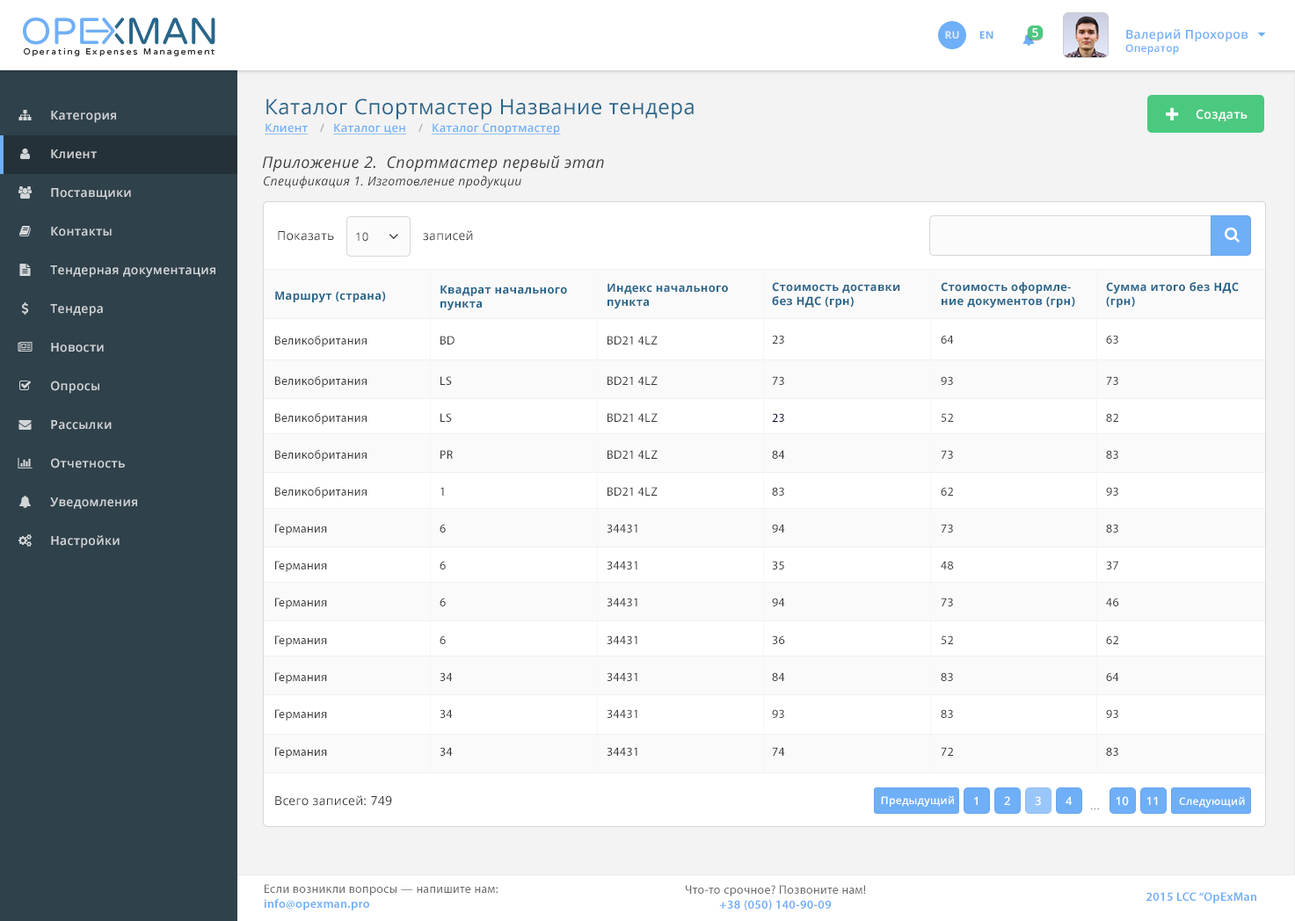
<style>
.page{position:relative;width:1295px;height:921px;background:#ffffff}
.page>*{position:absolute;margin:0}
.t1{font:12.3px "OpenSans-Semibold";letter-spacing:0.025em;color:#ffffff}
.t2{font:12.3px "OpenSans-Semibold";letter-spacing:0.025em;color:#6eaef7}
.t3{font:10.5px "OpenSans-Semibold";letter-spacing:0.025em;color:#6eaef7}
.t4{font:10.5px "OpenSans-Bold";letter-spacing:0.025em;color:#dbe9fd;text-transform:uppercase}
.t5{font:10.5px "OpenSans-Bold";letter-spacing:0.025em;color:#6faff8;text-transform:uppercase}
.t6{font:21px "OpenSans";letter-spacing:0.025em;color:#29658b}
.t7{font:12.3px "OpenSans-Semibold";letter-spacing:0.025em;color:#d2d5d7}
.t8{font:11.4px "OpenSans-Semibold";letter-spacing:0.025em;color:#6faff8;text-decoration:underline}
.t9{font:11.4px "OpenSans-Semibold";letter-spacing:0.025em;color:#afafaf}
.t10{font:15.8px "OpenSans-Italic";letter-spacing:0.025em;color:#373838}
.t11{font:12.3px "OpenSans-Italic";letter-spacing:0.025em;color:#373838}
.t12{font:12.3px "OpenSans";letter-spacing:0.025em;color:#333333}
.t13{font:11.4px "OpenSans";letter-spacing:0.025em;color:#333333}
.t14{font:11.4px "OpenSans-Bold";letter-spacing:0.025em;color:#29668b}
.t15{font:12.3px "MyriadPro-Regular";letter-spacing:0.025em;color:#3a3a3a}
.t16{font:12.3px "MyriadPro-Regular";letter-spacing:0.025em;color:#333333}
.t17{font:12.3px "MyriadPro-Regular";letter-spacing:0.025em;color:#000033}
.t18{font:10.5px "OpenSans-Semibold";letter-spacing:0.025em;color:#ffffff}
.t19{font:11.4px "OpenSans-Semibold";letter-spacing:0.025em;color:#ffffff}
.t20{font:11.4px "OpenSans";letter-spacing:0.025em;color:#999999}
.t21{font:12.3px "MyriadPro-Regular";letter-spacing:0.025em;color:#696969}
.t22{font:12.3px "MyriadPro-Semibold";letter-spacing:0.025em;color:#6eaef8}
</style>
<div class="page">
<p class="t1" style="left:1032px;top:28px;width:6px;height:10px">5</p>
<p class="t2" style="left:1125px;top:29px;width:123px;height:25px">Валерий Прохоров<br><span class="t3">Оператор</span></p>
<p class="t4" style="left:945px;top:31px;width:14px;height:8px">Ru</p>
<p class="t5" style="left:979px;top:31px;width:14px;height:8px">EN</p>
<p class="t6" style="left:266px;top:98px;width:427px;height:22px">Каталог Спортмастер Название тендера</p>
<p class="t7" style="left:51px;top:111px;width:65px;height:12px">Категория</p>
<p class="t1" style="left:1195px;top:109px;width:52px;height:12px">Создать</p>
<p class="t8" style="left:265px;top:123px;width:43px;height:11px">Клиент</p>
<p class="t9" style="left:320px;top:123px;width:4px;height:9px">/</p>
<p class="t8" style="left:333px;top:123px;width:73px;height:11px">Каталог цен</p>
<p class="t9" style="left:418px;top:123px;width:5px;height:9px">/</p>
<p class="t8" style="left:432px;top:123px;width:129px;height:11px">Каталог Спортмастер</p>
<p class="t7" style="left:51px;top:149px;width:46px;height:10px">Клиент</p>
<p class="t10" style="left:262px;top:156px;width:342px;height:16px">Приложение 2.  Спортмастер первый этап</p>
<p class="t11" style="left:264px;top:176px;width:257px;height:13px">Спецификация 1. Изготовление продукции</p>
<p class="t7" style="left:51px;top:188px;width:80px;height:12px">Поставщики</p>
<p class="t7" style="left:51px;top:227px;width:61px;height:9px">Контакты</p>
<p class="t12" style="left:278px;top:231px;width:56px;height:10px">Показать</p>
<p class="t13" style="left:356px;top:232px;width:12px;height:10px">10</p>
<p class="t12" style="left:423px;top:230px;width:50px;height:11px">записей</p>
<p class="t7" style="left:50px;top:265px;width:165px;height:13px">Тендерная документация</p>
<p class="t14" style="left:275px;top:291px;width:111px;height:11px">Маршрут (страна)</p>
<p class="t14" style="left:440px;top:285px;width:127px;height:25px">Квадрат начального<br>пункта</p>
<p class="t14" style="left:607px;top:283px;width:121px;height:25px">Индекс начального<br>пункта</p>
<p class="t14" style="left:772px;top:282px;width:128px;height:26px">Стоимость доставки <br>без НДС (грн)</p>
<p class="t14" style="left:940px;top:282px;width:135px;height:26px">Стоимость оформле-<br>ние документов (грн)</p>
<p class="t14" style="left:1106px;top:282px;width:132px;height:26px">Сумма итого без НДС<br>(грн)</p>
<p class="t7" style="left:50px;top:304px;width:53px;height:12px">Тендера</p>
<p class="t15" style="left:275px;top:336px;width:91px;height:11px">Великобритания</p>
<p class="t15" style="left:440px;top:336px;width:14px;height:9px">BD</p>
<p class="t15" style="left:607px;top:336px;width:50px;height:9px">BD21 4LZ</p>
<p class="t15" style="left:772px;top:335px;width:12px;height:9px">23</p>
<p class="t15" style="left:940px;top:335px;width:14px;height:9px">64</p>
<p class="t15" style="left:1106px;top:335px;width:12px;height:9px">63</p>
<p class="t7" style="left:51px;top:343px;width:53px;height:9px">Новости</p>
<p class="t15" style="left:275px;top:376px;width:91px;height:12px">Великобритания</p>
<p class="t15" style="left:440px;top:376px;width:12px;height:9px">LS</p>
<p class="t15" style="left:607px;top:376px;width:50px;height:9px">BD21 4LZ</p>
<p class="t16" style="left:772px;top:376px;width:12px;height:9px">73</p>
<p class="t15" style="left:940px;top:376px;width:13px;height:9px">93</p>
<p class="t15" style="left:1106px;top:376px;width:12px;height:9px">73</p>
<p class="t7" style="left:51px;top:381px;width:48px;height:13px">Опросы</p>
<p class="t15" style="left:275px;top:413px;width:91px;height:12px">Великобритания</p>
<p class="t15" style="left:440px;top:413px;width:12px;height:9px">LS</p>
<p class="t15" style="left:607px;top:413px;width:50px;height:9px">BD21 4LZ</p>
<p class="t17" style="left:772px;top:413px;width:12px;height:9px">23</p>
<p class="t15" style="left:940px;top:413px;width:13px;height:9px">52</p>
<p class="t15" style="left:1106px;top:413px;width:12px;height:9px">82</p>
<p class="t7" style="left:51px;top:420px;width:61px;height:10px">Рассылки</p>
<p class="t15" style="left:275px;top:450px;width:91px;height:11px">Великобритания</p>
<p class="t15" style="left:440px;top:450px;width:13px;height:9px">PR</p>
<p class="t15" style="left:607px;top:450px;width:50px;height:9px">BD21 4LZ</p>
<p class="t16" style="left:772px;top:450px;width:13px;height:9px">84</p>
<p class="t15" style="left:940px;top:450px;width:13px;height:9px">73</p>
<p class="t15" style="left:1106px;top:450px;width:12px;height:9px">83</p>
<p class="t7" style="left:51px;top:458px;width:74px;height:10px">Отчетность</p>
<p class="t7" style="left:50px;top:497px;width:87px;height:12px">Уведомления</p>
<p class="t15" style="left:275px;top:487px;width:91px;height:11px">Великобритания</p>
<p class="t15" style="left:440px;top:487px;width:4px;height:9px">1</p>
<p class="t15" style="left:607px;top:487px;width:50px;height:9px">BD21 4LZ</p>
<p class="t15" style="left:772px;top:487px;width:12px;height:9px">83</p>
<p class="t15" style="left:940px;top:487px;width:13px;height:9px">62</p>
<p class="t15" style="left:1106px;top:487px;width:12px;height:9px">93</p>
<p class="t15" style="left:275px;top:524px;width:52px;height:11px">Германия</p>
<p class="t15" style="left:439px;top:524px;width:7px;height:9px">6</p>
<p class="t15" style="left:606px;top:524px;width:31px;height:9px">34431</p>
<p class="t15" style="left:772px;top:524px;width:13px;height:9px">94</p>
<p class="t15" style="left:940px;top:524px;width:13px;height:9px">73</p>
<p class="t15" style="left:1106px;top:524px;width:12px;height:9px">83</p>
<p class="t7" style="left:51px;top:535px;width:69px;height:13px">Настройки</p>
<p class="t15" style="left:275px;top:561px;width:52px;height:11px">Германия</p>
<p class="t15" style="left:439px;top:561px;width:7px;height:9px">6</p>
<p class="t15" style="left:606px;top:561px;width:31px;height:9px">34431</p>
<p class="t15" style="left:772px;top:561px;width:12px;height:9px">35</p>
<p class="t15" style="left:940px;top:561px;width:14px;height:9px">48</p>
<p class="t15" style="left:1106px;top:561px;width:12px;height:9px">37</p>
<p class="t15" style="left:275px;top:598px;width:52px;height:11px">Германия</p>
<p class="t15" style="left:439px;top:598px;width:7px;height:8px">6</p>
<p class="t15" style="left:606px;top:598px;width:31px;height:8px">34431</p>
<p class="t15" style="left:772px;top:598px;width:13px;height:8px">94</p>
<p class="t15" style="left:940px;top:598px;width:13px;height:8px">73</p>
<p class="t15" style="left:1106px;top:598px;width:13px;height:8px">46</p>
<p class="t15" style="left:275px;top:635px;width:52px;height:12px">Германия</p>
<p class="t15" style="left:439px;top:635px;width:7px;height:9px">6</p>
<p class="t15" style="left:606px;top:635px;width:31px;height:9px">34431</p>
<p class="t15" style="left:772px;top:635px;width:13px;height:9px">36</p>
<p class="t15" style="left:940px;top:635px;width:13px;height:9px">52</p>
<p class="t15" style="left:1106px;top:635px;width:12px;height:9px">62</p>
<p class="t15" style="left:275px;top:672px;width:52px;height:12px">Германия</p>
<p class="t15" style="left:439px;top:672px;width:14px;height:9px">34</p>
<p class="t15" style="left:606px;top:672px;width:31px;height:9px">34431</p>
<p class="t15" style="left:772px;top:672px;width:13px;height:9px">84</p>
<p class="t15" style="left:940px;top:672px;width:13px;height:9px">83</p>
<p class="t15" style="left:1106px;top:672px;width:13px;height:9px">64</p>
<p class="t15" style="left:275px;top:709px;width:52px;height:12px">Германия</p>
<p class="t15" style="left:439px;top:709px;width:14px;height:9px">34</p>
<p class="t15" style="left:606px;top:709px;width:31px;height:9px">34431</p>
<p class="t15" style="left:772px;top:709px;width:12px;height:9px">93</p>
<p class="t15" style="left:940px;top:709px;width:13px;height:9px">83</p>
<p class="t15" style="left:1106px;top:709px;width:12px;height:9px">93</p>
<p class="t16" style="left:275px;top:747px;width:52px;height:11px">Германия</p>
<p class="t16" style="left:439px;top:747px;width:14px;height:9px">34</p>
<p class="t16" style="left:606px;top:747px;width:31px;height:9px">34431</p>
<p class="t16" style="left:772px;top:747px;width:13px;height:9px">74</p>
<p class="t16" style="left:940px;top:747px;width:13px;height:9px">72</p>
<p class="t16" style="left:1106px;top:747px;width:12px;height:9px">83</p>
<p class="t12" style="left:275px;top:795px;width:117px;height:11px">Всего записей: 749</p>
<p class="t18" style="left:881px;top:795px;width:73px;height:12px">Предыдущий</p>
<p class="t19" style="left:974px;top:796px;width:3px;height:9px">1</p>
<p class="t19" style="left:1004px;top:796px;width:6px;height:9px">2</p>
<p class="t19" style="left:1034px;top:796px;width:7px;height:10px">3</p>
<p class="t19" style="left:1065px;top:796px;width:7px;height:9px">4</p>
<p class="t19" style="left:1115px;top:796px;width:13px;height:10px">10</p>
<p class="t19" style="left:1146px;top:796px;width:11px;height:9px">11</p>
<p class="t18" style="left:1179px;top:796px;width:66px;height:12px">Следующий</p>
<p class="t20" style="left:1091px;top:808px;width:8px;height:2px">...</p>
<p class="t21" style="left:264px;top:884px;width:234px;height:27px">Если возникли вопросы — напишите нам:<br><span class="t22">info@opexman.pro</span></p>
<p class="t21" style="left:686px;top:885px;width:180px;height:26px;text-align:center">Что-то срочное? Позвоните нам!<br><span class="t22">+38 (050) 140-90-09</span></p>
<p class="t22" style="left:1146px;top:892px;width:110px;height:11px">2015 LCC “OpExMan</p>
</div>
